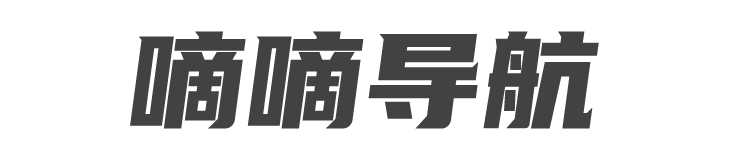
<style>
.page{position:relative;width:730px;height:160px;background:#ffffff}
.page>*{position:absolute;margin:0}
.t1{font:134.7px "YouSheBiaoTiHei";color:#424242;scale:0.95 1}
</style>
<div class="page">
<p class="t1" style="left:130px;top:31px;width:469px;height:98px">嘀嘀导航</p>
</div>
